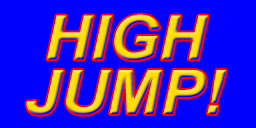
<style>
.page{position:relative;width:256px;height:128px;background:#0000ff}
.page>*{position:absolute;margin:0}
.t1{font:61.3px/54.7px "Arial-BoldItalicMT";scale:1.05 1}
</style>
<div class="page">
<p class="t1" style="left:26px;top:14px;width:200px;height:101px;text-align:center">HIGH<br>JUMP!</p>
</div>
